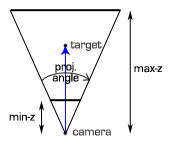
<style>
.page{position:relative;width:175px;height:160px;background:#ffffff}
.page>*{position:absolute;margin:0}
.t1{font:12px "EurostileRegular";color:#404040}
.t2{font:12px/11px "EurostileRegular";color:#000000}
.t3{font:12px "EurostileRegular";color:#000000}
</style>
<div class="page">
<p class="t1" style="left:70px;top:41px;width:32px;height:10px">target</p>
<p class="t2" style="left:52px;top:62px;width:27px;height:22px;text-align:center">proj.<br>angle</p>
<p class="t3" style="left:134px;top:66px;width:28px;height:7px">max-z</p>
<p class="t3" style="left:9px;top:112px;width:26px;height:9px">min-z</p>
<p class="t1" style="left:73px;top:129px;width:38px;height:7px">camera</p>
</div>
